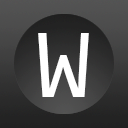
<style>
.page{position:relative;width:128px;height:128px}
.page>*{position:absolute;margin:0}
.t1{font:100px "Consolas";color:#ffffff}
</style>
<div class="page">
<p class="t1" style="left:38px;top:33px;width:51px;height:64px">W</p>
</div>
